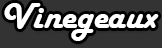
<style>
.page{position:relative;width:162px;height:48px;background:#333333}
.page>*{position:absolute;margin:0}
.t1{font:37.5px "HarlowSolid";color:#ffffff}
</style>
<div class="page">
<p class="t1" style="left:4px;top:3px;width:155px;height:38px">Vinegeaux</p>
</div>
